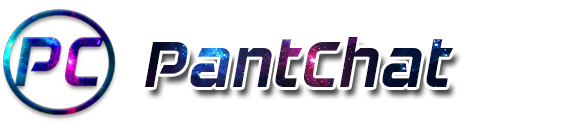
<style>
.page{position:relative;width:567px;height:122px;background:#ffffff}
.page>*{position:absolute;margin:0}
.t1{font:66.7px "DAGGERSQUARE-OBLIQUE";letter-spacing:0.025em}
</style>
<div class="page">
<p class="t1" style="left:145px;top:37px;width:308px;height:50px">PantChat</p>
</div>
